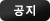
<style>
.page{position:relative;width:50px;height:21px;background:#333333}
.page>*{position:absolute;margin:0}
.t1{font:12px "YDIYGO330";letter-spacing:-0.075em;color:#ffffff;scale:0.9 1}
</style>
<div class="page">
<p class="t1" style="left:14px;top:5px;width:21px;height:11px">공 지</p>
</div>
